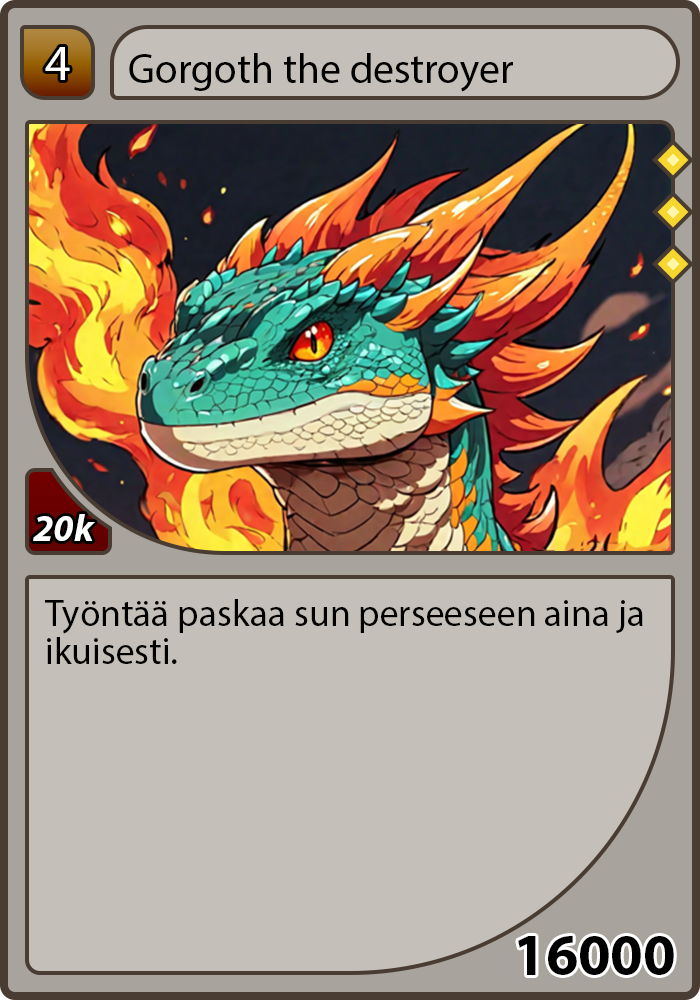
<style>
.page{position:relative;width:700px;height:1000px;background:#c4c0b9}
.page>*{position:absolute;margin:0}
.t1{font:50px "MyriadPro-Regular";color:#ffffff}
.t2{font:41.7px "MyriadPro-Regular";color:#000000}
.t3{font:37.5px "MyriadPro-BoldIt";color:#ffffff}
.t4{font:37.5px/37.5px "MyriadPro-Regular";color:#000000}
.t5{font:58.3px "MyriadPro-Bold";color:#000000}
</style>
<div class="page">
<p class="t1" style="left:45px;top:47px;width:25px;height:33px">4</p>
<p class="t2" style="left:129px;top:53px;width:384px;height:39px">Gorgoth the destroyer</p>
<p class="t3" style="left:33px;top:514px;width:62px;height:27px">20k</p>
<p class="t4" style="left:45px;top:599px;width:598px;height:65px">Työntää paskaa sun perseeseen aina ja ikuisesti.</p>
<p class="t5" style="left:518px;top:936px;width:156px;height:39px">16000</p>
</div>
